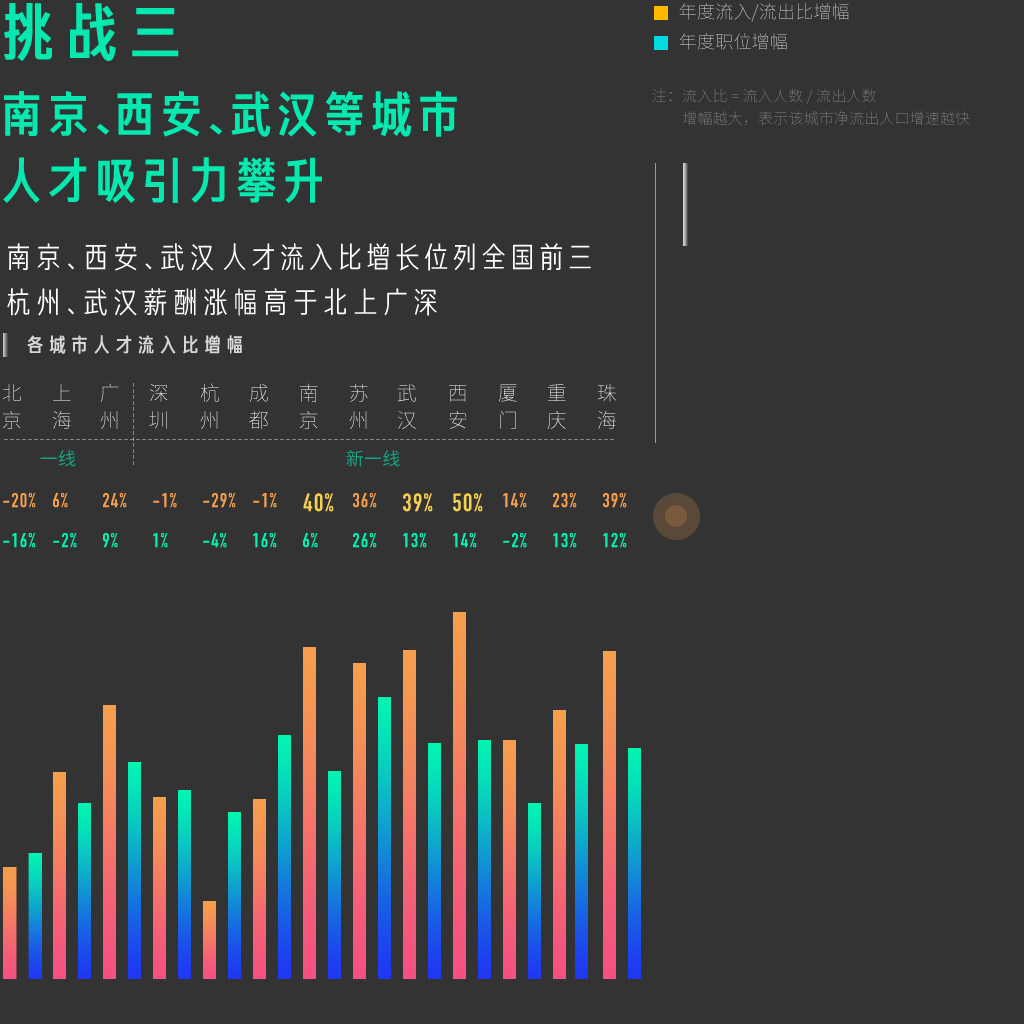
<style>
.page{position:relative;width:1024px;height:1024px;background:#333333}
.page>*{position:absolute;margin:0}
.t1{font:63.4px "FZCJHJW--GB1-0";color:#05e9b1}
.t2{font:18px "SourceHanSansCN-ExtraLight";letter-spacing:0.01em}
.t3{font:15px "SourceHanSansCN-ExtraLight";letter-spacing:0.01em;color:#858585}
.t4{font:50px/66.5px "FZCJHJW--GB1-0";letter-spacing:-0.06em;color:#05e9b1}
.t5{font:50px/66.5px "FZCJHJW--GB1-0";letter-spacing:-0.62em;color:#05e9b1}
.t6{font:50px/66.5px "FZCJHJW--GB1-0";letter-spacing:-0.56em;color:#05e9b1}
.t7{font:30px "FZJHJW--GB1-0";color:#ffffff}
.t8{font:30px "FZJHJW--GB1-0";letter-spacing:-0.42em;color:#ffffff}
.t9{font:30px "FZJHJW--GB1-0";letter-spacing:-0.46em;color:#ffffff}
.t10{font:30px "FZJHJW--GB1-0";letter-spacing:-0.04em;color:#ffffff}
.t11{font:30px "FZJHJW--GB1-0";letter-spacing:-0.44em;color:#ffffff}
.t12{font:20.2px "FZCJHJW--GB1-0";letter-spacing:0.1em;color:#d7d7d7}
.t13{font:20px/27.4px "SourceHanSansCN-ExtraLight";letter-spacing:0.01em}
.t14{font:20px/27.4px "SourceHanSansCN-ExtraLight";letter-spacing:0.01em;color:#ffffff}
.t15{font:18px "SourceHanSansCN-Regular";letter-spacing:0.01em;color:#16a484}
.t16{font:20px "DINCondensed-Bold";letter-spacing:0.06em;color:#f59e4d}
.t17{font:25px "DINCondensed-Bold";letter-spacing:0.06em;color:#f5cf4d}
.t18{font:20px "DINCondensed-Bold";letter-spacing:0.06em;color:#02f2b2}
</style>
<div class="page">
<p class="t1" style="left:4px;top:3px;width:175px;height:58px">挑战三</p>
<p class="t2" style="left:679px;top:3px;width:170px;height:19px">年度流入/流出比增幅</p>
<p class="t2" style="left:679px;top:33px;width:108px;height:17px">年度职位增幅</p>
<p class="t3" style="left:652px;top:88px;width:224px;height:16px">注：流入比 = 流入人数 / 流出人数</p>
<p class="t4" style="left:3px;top:91px;width:454px;height:112px">南京<span class="t5">、</span>西安<span class="t6">、</span>武汉等城市<br>人才吸引力攀升</p>
<p class="t3" style="left:683px;top:111px;width:287px;height:14px">增幅越大，表示该城市净流出人口增速越快</p>
<p class="t7" style="left:8px;top:243px;width:206px;height:28px">南京<span class="t8">、</span>西安<span class="t9">、</span>武汉</p>
<p class="t10" style="left:223px;top:243px;width:368px;height:28px">人才流入比增长位列全国前三</p>
<p class="t7" style="left:7px;top:288px;width:430px;height:28px">杭州<span class="t11">、</span>武汉薪酬涨幅高于北上广深</p>
<p class="t12" style="left:27px;top:335px;width:215px;height:19px">各城市人才流入比增幅</p>
<p class="t13" style="left:2px;top:384px;width:19px;height:45px">北<br>京</p>
<p class="t13" style="left:52px;top:384px;width:19px;height:45px">上<br>海</p>
<p class="t13" style="left:100px;top:383px;width:19px;height:46px">广<br>州</p>
<p class="t13" style="left:149px;top:384px;width:19px;height:45px">深<br>圳</p>
<p class="t13" style="left:200px;top:383px;width:19px;height:46px">杭<br>州</p>
<p class="t13" style="left:249px;top:383px;width:19px;height:46px">成<br>都</p>
<p class="t13" style="left:300px;top:383px;width:18px;height:46px">南<br>京</p>
<p class="t13" style="left:349px;top:383px;width:19px;height:46px">苏<br>州</p>
<p class="t14" style="left:397px;top:383px;width:19px;height:46px">武<br>汉</p>
<p class="t13" style="left:449px;top:385px;width:18px;height:44px">西<br>安</p>
<p class="t13" style="left:498px;top:384px;width:19px;height:45px">厦<br>门</p>
<p class="t13" style="left:547px;top:383px;width:19px;height:46px">重<br>庆</p>
<p class="t13" style="left:597px;top:383px;width:20px;height:46px">珠<br>海</p>
<p class="t15" style="left:40px;top:450px;width:36px;height:17px">一线</p>
<p class="t15" style="left:346px;top:450px;width:54px;height:17px">新一线</p>
<p class="t16" style="left:3px;top:493px;width:33px;height:15px">-20%</p>
<p class="t16" style="left:53px;top:493px;width:15px;height:15px">6%</p>
<p class="t16" style="left:103px;top:493px;width:24px;height:15px">24%</p>
<p class="t16" style="left:153px;top:493px;width:24px;height:15px">-1%</p>
<p class="t16" style="left:203px;top:493px;width:33px;height:15px">-29%</p>
<p class="t16" style="left:253px;top:493px;width:24px;height:15px">-1%</p>
<p class="t17" style="left:303px;top:493px;width:31px;height:19px">40%</p>
<p class="t16" style="left:353px;top:493px;width:24px;height:15px">36%</p>
<p class="t17" style="left:403px;top:493px;width:30px;height:19px">39%</p>
<p class="t17" style="left:453px;top:493px;width:30px;height:19px">50%</p>
<p class="t16" style="left:503px;top:493px;width:24px;height:15px">14%</p>
<p class="t16" style="left:553px;top:493px;width:24px;height:15px">23%</p>
<p class="t16" style="left:603px;top:493px;width:24px;height:15px">39%</p>
<p class="t18" style="left:3px;top:533px;width:33px;height:15px">-16%</p>
<p class="t18" style="left:53px;top:533px;width:24px;height:15px">-2%</p>
<p class="t18" style="left:103px;top:533px;width:15px;height:15px">9%</p>
<p class="t18" style="left:153px;top:533px;width:15px;height:15px">1%</p>
<p class="t18" style="left:203px;top:533px;width:24px;height:15px">-4%</p>
<p class="t18" style="left:253px;top:533px;width:24px;height:15px">16%</p>
<p class="t18" style="left:303px;top:533px;width:15px;height:15px">6%</p>
<p class="t18" style="left:353px;top:533px;width:24px;height:15px">26%</p>
<p class="t18" style="left:403px;top:533px;width:24px;height:15px">13%</p>
<p class="t18" style="left:453px;top:533px;width:24px;height:15px">14%</p>
<p class="t18" style="left:503px;top:533px;width:24px;height:15px">-2%</p>
<p class="t18" style="left:553px;top:533px;width:24px;height:15px">13%</p>
<p class="t18" style="left:603px;top:533px;width:24px;height:15px">12%</p>
</div>
